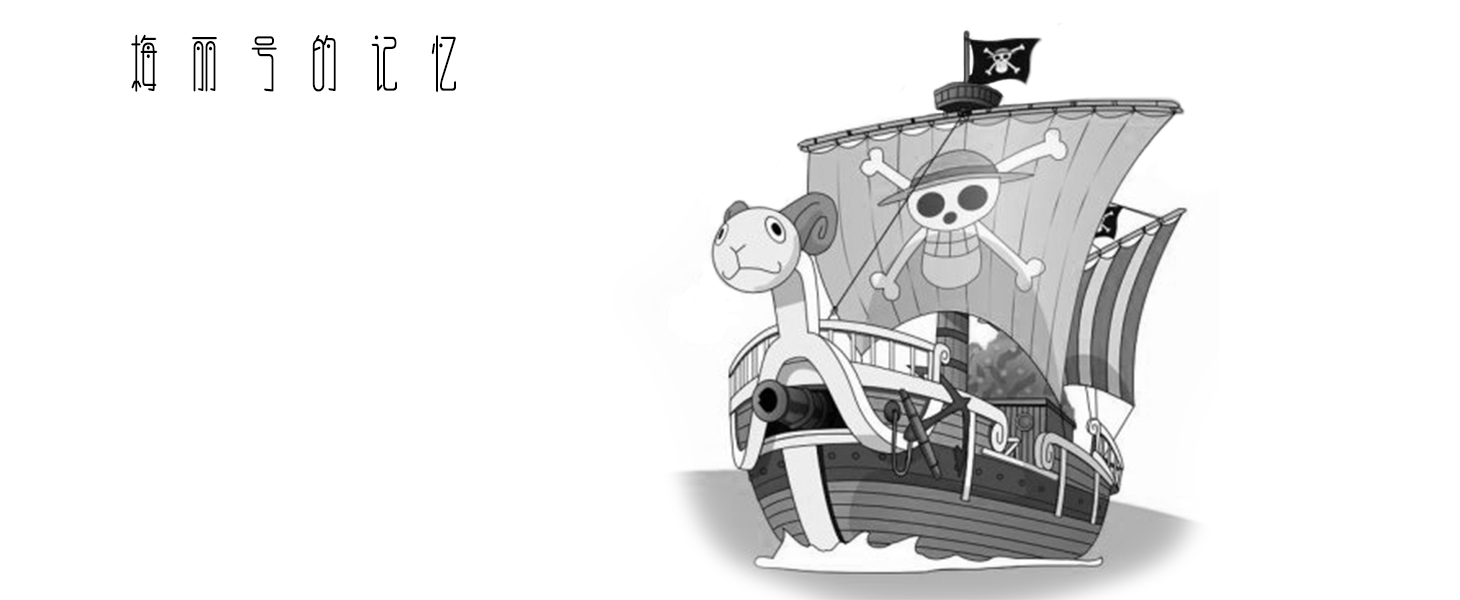
<style>
.page{position:relative;width:1460px;height:600px;background:#ffffff}
.page>*{position:absolute;margin:0}
.t1{font:60px "Tensentype-XiangSiJ";letter-spacing:0.2em;color:#000000;scale:0.83 1}
</style>
<div class="page">
<p class="t1" style="left:131px;top:34px;width:325px;height:59px">梅丽号的记忆</p>
</div>
